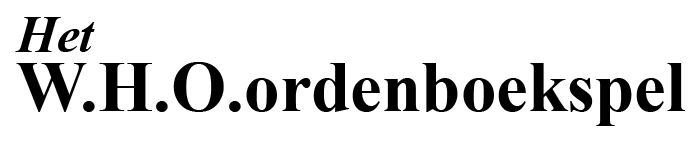
<style>
.page{position:relative;width:700px;height:144px;background:#ffffff}
.page>*{position:absolute;margin:0}
.t1{font:51px "TimesNewRomanPS-BoldItalicMT";color:#000000}
.t2{font:70.9px "TimesNewRomanPS-BoldMT";color:#000000}
</style>
<div class="page">
<p class="t1" style="left:15px;top:17px;width:80px;height:35px">Het</p>
<p class="t2" style="left:16px;top:62px;width:669px;height:64px">W.H.O.ordenboekspel</p>
</div>
